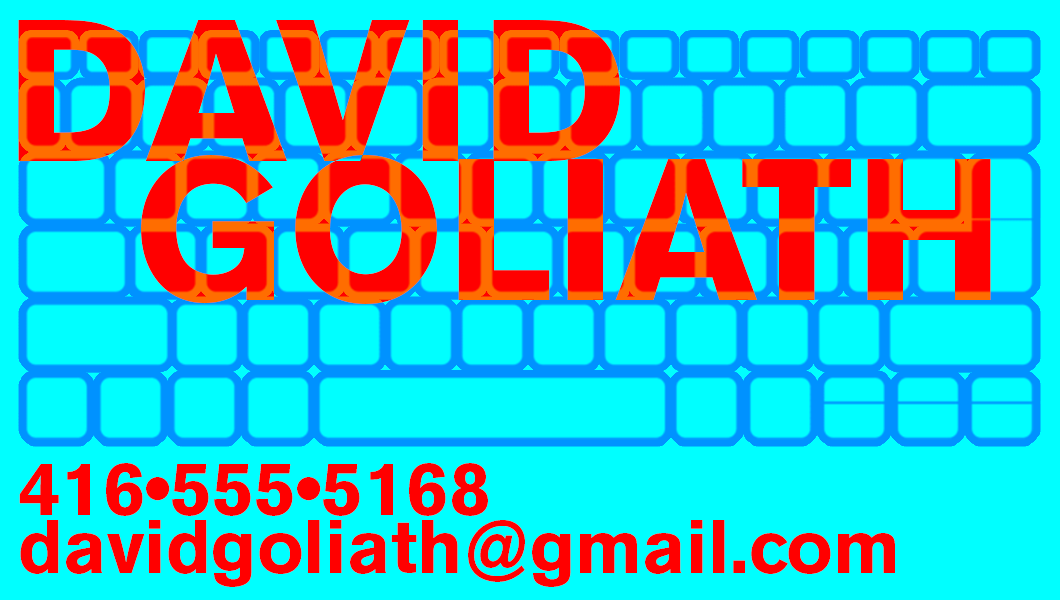
<style>
.page{position:relative;width:1060px;height:600px;background:#00ffff}
.page>*{position:absolute;margin:0}
.t1{font:200px "AkzidenzGroteskBE-Bold"}
.t2{font:75px "AkzidenzGroteskBE-Bold";color:#ff0000}
</style>
<div class="page">
<p class="t1" style="left:18px;top:20px;width:602px;height:142px">DAVID</p>
<p class="t1" style="left:141px;top:154px;width:850px;height:150px">GOLIATH</p>
<p class="t2" style="left:19px;top:463px;width:469px;height:53px">416•555•5168</p>
<p class="t2" style="left:20px;top:520px;width:875px;height:67px">davidgoliath@gmail.com</p>
</div>
